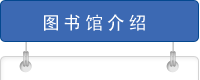
<style>
.page{position:relative;width:200px;height:80px;background:#3c69b3}
.page>*{position:absolute;margin:0}
.t1{font:18px "SimHei";letter-spacing:0.2em;color:#ffffff}
</style>
<div class="page">
<p class="t1" style="left:44px;top:14px;width:101px;height:17px">图书馆介绍</p>
</div>
